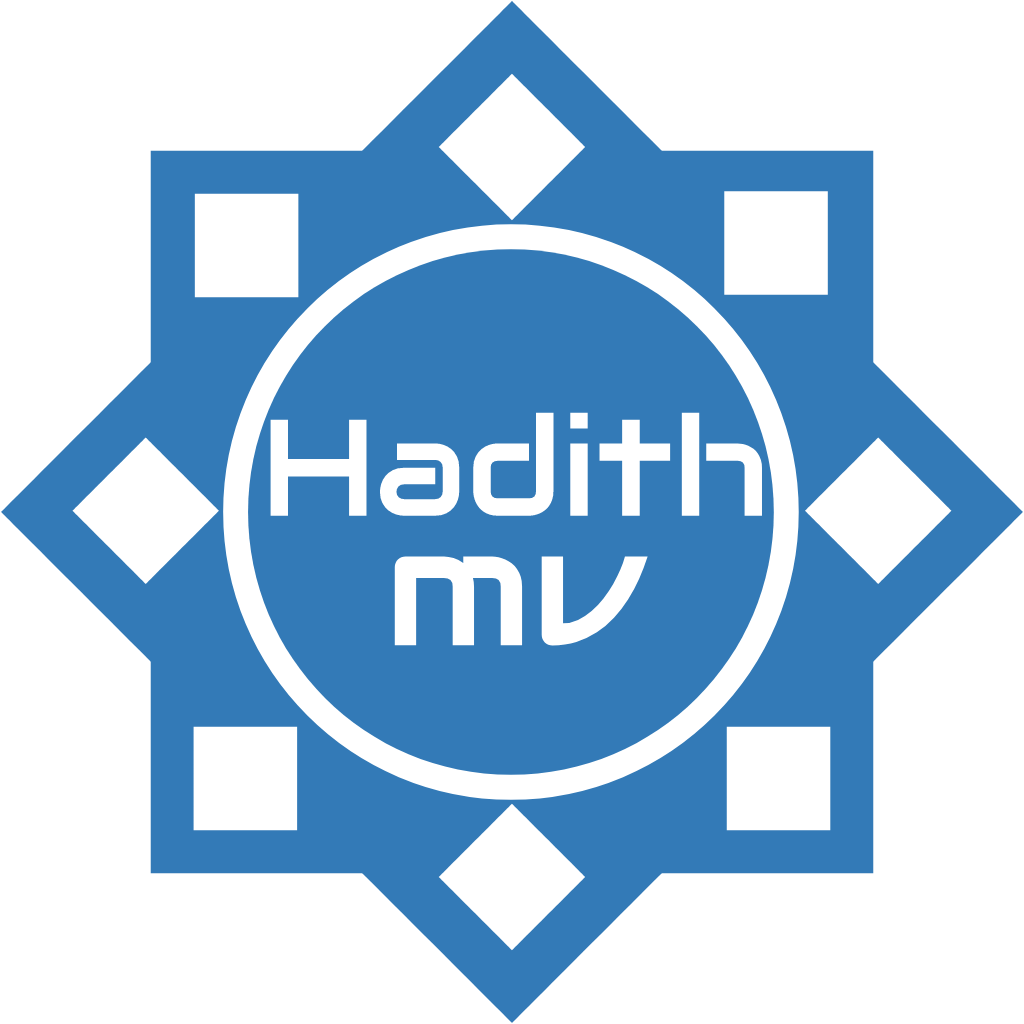
<style>
.page{position:relative;width:1024px;height:1024px;background:#ffffff}
.page>*{position:absolute;margin:0}
.t1{font:137px "Audiowide-Regular";color:#ffffff}
.t2{font:168.2px "Audiowide-Regular";color:#ffffff}
.t3{font:123.3px "Ubuntu";color:#ffffff}
</style>
<div class="page">
<p class="t1" style="left:270px;top:412px;width:492px;height:104px">Hadith</p>
<p class="t2" style="left:394px;top:556px;width:254px;height:90px"><span class="t3"> </span>mv</p>
</div>
